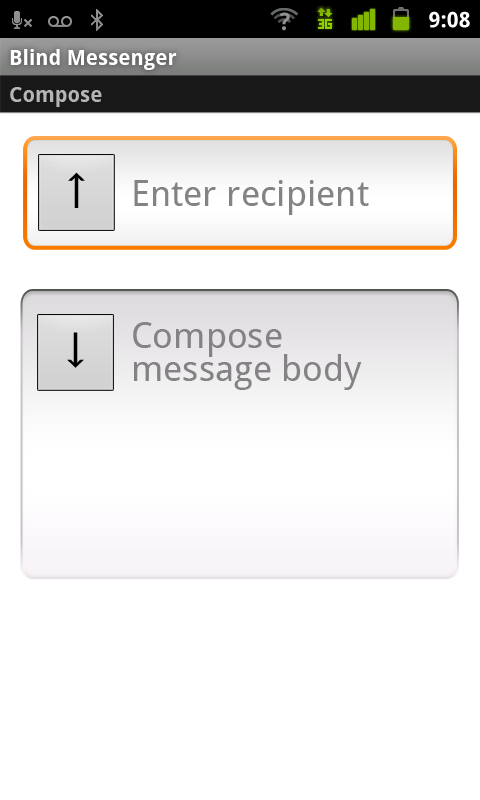
<style>
.page{position:relative;width:480px;height:800px;background:#ffffff}
.page>*{position:absolute;margin:0}
.t1{font:21.5px "DroidSans-Bold";letter-spacing:0.005em;color:#ffffff}
.t2{font:21px "DroidSans-Bold";color:#ffffff}
.t3{font:21px "DroidSans-Bold";color:#b5b5b5}
.t4{font:52.2px "SegoeUISymbol";color:#000000}
.t5{font:36px "DroidSans";color:#848284}
.t6{font:36px/32.7px "DroidSans";color:#848284}
.t7{font:52.1px "SegoeUISymbol";color:#000000}
</style>
<div class="page">
<p class="t1" style="left:429px;top:11px;width:41px;height:17px">9:08</p>
<p class="t2" style="left:10px;top:49px;width:167px;height:21px">Blind Messenger</p>
<p class="t3" style="left:10px;top:87px;width:92px;height:20px">Compose</p>
<p class="t4" style="left:68px;top:172px;width:17px;height:36px">↑</p>
<p class="t5" style="left:134px;top:180px;width:235px;height:35px">Enter recipient</p>
<p class="t6" style="left:133px;top:322px;width:229px;height:68px">Compose <br>message body</p>
<p class="t7" style="left:67px;top:332px;width:17px;height:36px">↓</p>
</div>
